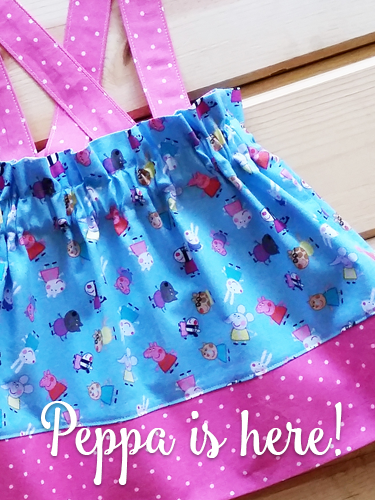
<style>
.page{position:relative;width:375px;height:500px}
.page>*{position:absolute;margin:0}
.t1{font:68px "Smoothie_Shoppe";color:#ffffff;scale:0.9 1}
</style>
<div class="page">
<p class="t1" style="left:41px;top:401px;width:301px;height:84px">Peppa is here!</p>
</div>
